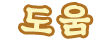
<style>
.page{position:relative;width:110px;height:49px;background:#ffffff}
.page>*{position:absolute;margin:0}
.t1{font:34px "SDKukdetopokki-aLt";letter-spacing:0.1em;color:#fcf5bd;font-weight:bold}
</style>
<div class="page">
<p class="t1" style="left:59px;top:5px;width:32px;height:31px;rotate:-1deg">움</p>
<p class="t1" style="left:20px;top:7px;width:32px;height:27px;rotate:6deg">도</p>
</div>
